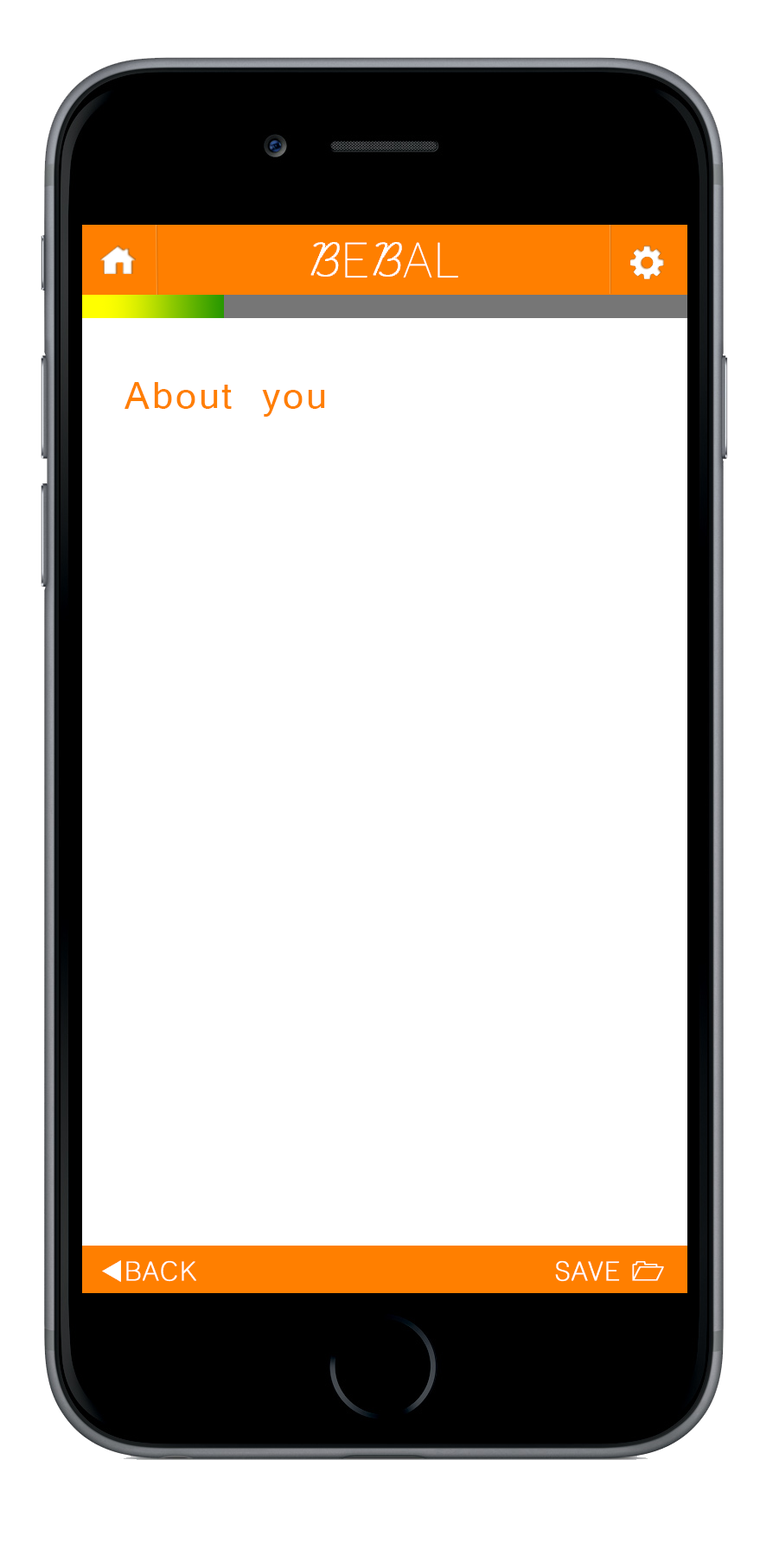
<style>
.page{position:relative;width:760px;height:1568px;background:#ffffff}
.page>*{position:absolute;margin:0}
.t1{font:48.3px "Lane-Narrow";letter-spacing:0.06em;color:#ffffff}
.t2{font:58px "LearningCurveDashedPro";letter-spacing:0.06em;color:#ffffff;font-weight:bold}
.t3{font:41.5px "Vrinda";letter-spacing:0.06em;color:#ff7f00}
.t4{font:41.5px "Vrinda";letter-spacing:0.06em;color:#ff7f00;font-weight:bold}
.t5{font:25.9px "Lane-Narrow";letter-spacing:0.06em;color:#ffffff;font-weight:bold}
.t6{font:25.9px "Wingdings3";letter-spacing:0.06em;color:#ffffff}
.t7{font:25.9px "Wingdings-Regular";letter-spacing:0.06em;color:#ffffff;font-weight:bold}
</style>
<div class="page">
<p class="t1" style="left:310px;top:242px;width:148px;height:36px"><span class="t2">B</span>E<span class="t2">B</span>AL</p>
<p class="t3" style="left:124px;top:382px;width:201px;height:35px">About you<br><span class="t4"></span></p>
<p class="t5" style="left:102px;top:1260px;width:94px;height:22px"><span class="t6">t</span>BACK</p>
<p class="t5" style="left:555px;top:1260px;width:109px;height:22px">SAVE <span class="t7">1</span></p>
</div>
